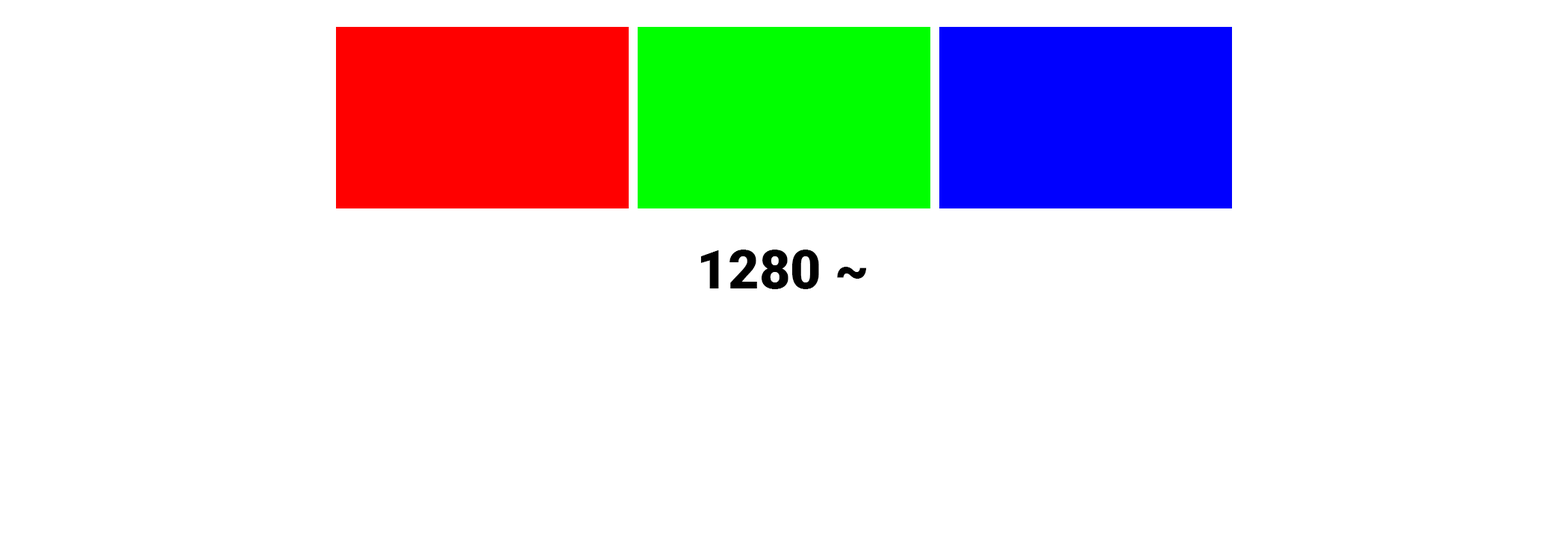
<style>
.page{position:relative;width:1568px;height:538px;background:#ffffff}
.page>*{position:absolute;margin:0}
.t1{font:53.8px "Roboto-Black";color:#000000}
</style>
<div class="page">
<p class="t1" style="left:700px;top:249px;width:167px;height:40px">1280 ~</p>
</div>
